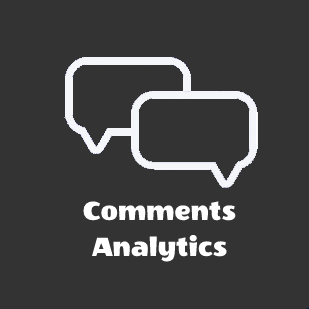
<style>
.page{position:relative;width:309px;height:309px;background:#333333}
.page>*{position:absolute;margin:0}
.t1{font:30px "WendyOne-Regular";color:#ffffff}
</style>
<div class="page">
<p class="t1" style="left:83px;top:201px;width:153px;height:61px;text-align:center">Comments<br>Analytics</p>
</div>
